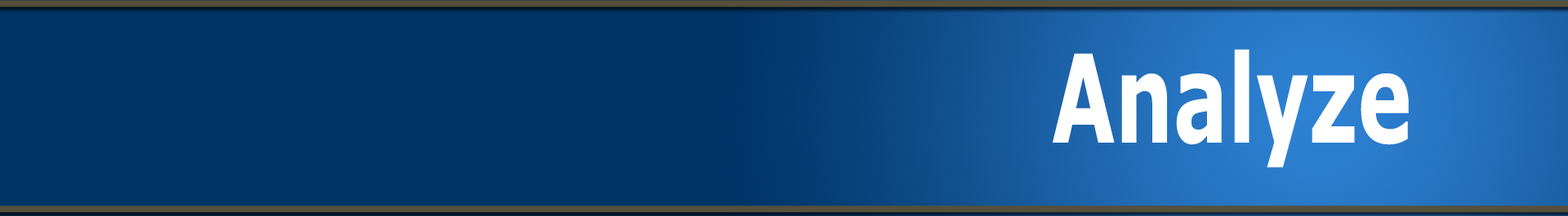
<style>
.page{position:relative;width:1568px;height:216px;background:#003366}
.page>*{position:absolute;margin:0}
.t1{font:122.5px "Verdana-Bold";color:#ffffff;scale:0.67 1}
</style>
<div class="page">
<p class="t1" style="left:1052px;top:49px;width:357px;height:119px">Analyze</p>
</div>
